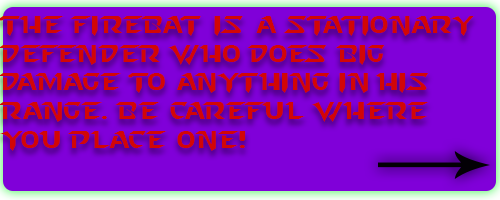
<style>
.page{position:relative;width:500px;height:200px;background:#8000d9}
.page>*{position:absolute;margin:0}
.t1{font:24px "StarcraftNormal";color:#d20606}
</style>
<div class="page">
<p class="t1" style="left:0px;top:16px;width:474px;height:135px">The Firebat is a stationary defender who does big damage to anything in his range. Be careful where you place one!</p>
</div>
